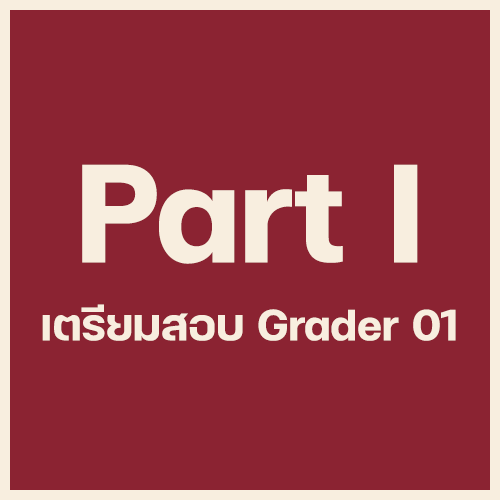
<style>
.page{position:relative;width:500px;height:500px;background:#8b2332}
.page>*{position:absolute;margin:0}
.t1{font:190px "FCMinimalBold";color:#f8eedf}
.t2{font:60px "FCMinimalBold";color:#f8eedf}
</style>
<div class="page">
<p class="t1" style="left:82px;top:164px;width:336px;height:100px">Part I</p>
<p class="t2" style="left:42px;top:304px;width:414px;height:37px">เตรียมสอบ Grader 01</p>
</div>
